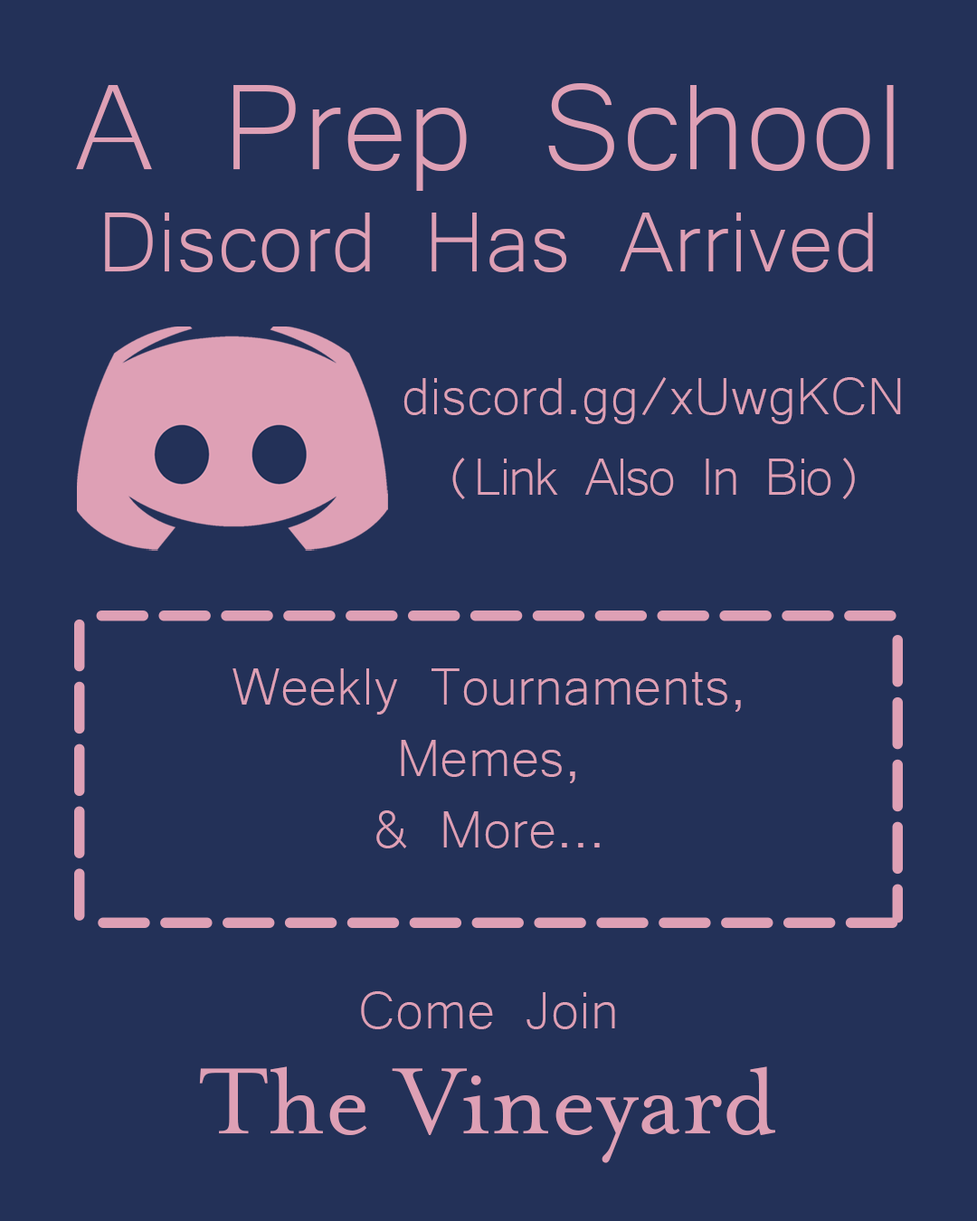
<style>
.page{position:relative;width:977px;height:1221px;background:#233158}
.page>*{position:absolute;margin:0}
.t1{font:109.5px/101.9px "Microsoft-Yi-Baiti";color:#dea0b5}
.t2{font:157.4px/101.9px "Microsoft-Yi-Baiti";color:#dea0b5}
.t3{font:68.2px "Microsoft-Yi-Baiti";color:#dea0b5}
.t4{font:68.2px "Microsoft-Yi-Baiti";letter-spacing:-0.04em;color:#dea0b5}
.t5{font:68.2px/71.4px "Microsoft-Yi-Baiti";color:#dea0b5}
.t6{font:108px "MrsEavesOT-Roman";color:#dea0b5}
</style>
<div class="page">
<p class="t1" style="left:76px;top:83px;width:818px;height:189px;text-align:center"><span class="t2">A Prep School<br></span>Discord Has Arrived</p>
<p class="t3" style="left:403px;top:377px;width:498px;height:47px">discord.gg/xUwgKCN</p>
<p class="t4" style="left:452px;top:458px;width:403px;height:41px">(Link Also In Bio)</p>
<p class="t5" style="left:232px;top:668px;width:509px;height:180px;text-align:center">Weekly Tournaments,<br>Memes,<br>&amp; More...</p>
<p class="t3" style="left:361px;top:991px;width:254px;height:38px">Come Join</p>
<p class="t6" style="left:199px;top:1066px;width:576px;height:97px">The Vineyard</p>
</div>
